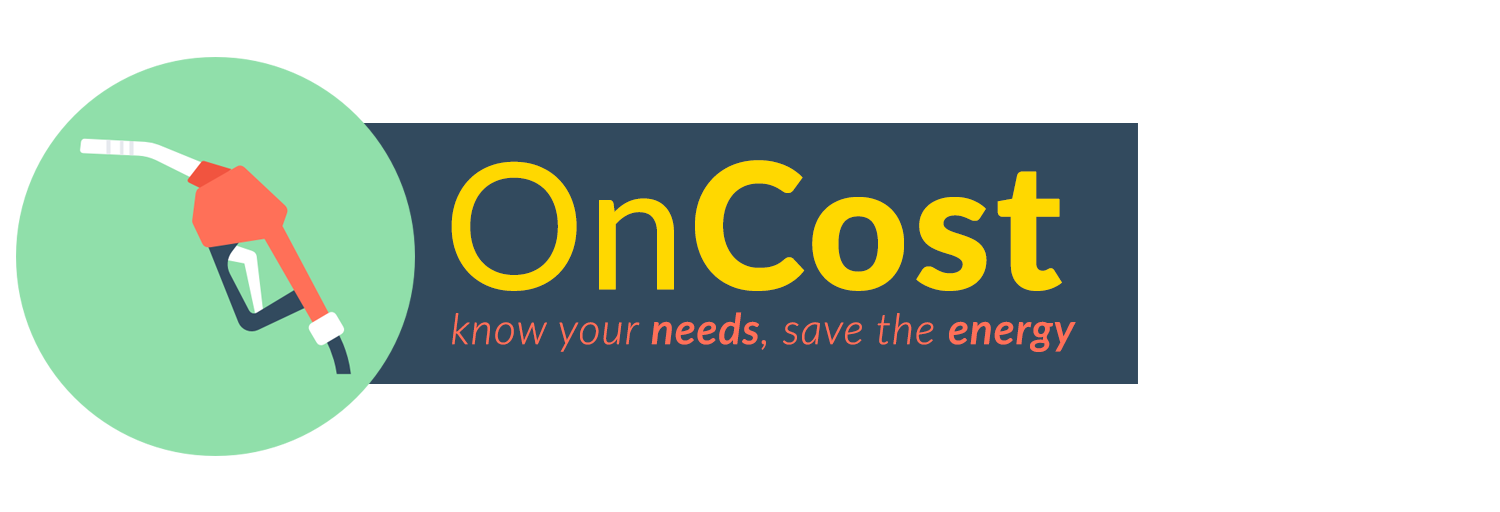
<style>
.page{position:relative;width:1500px;height:512px;background:#ffffff}
.page>*{position:absolute;margin:0}
.t1{font:174.7px "Lato-Heavy";color:#ffd800;font-weight:bold}
.t2{font:174.7px "Lato-Regular";color:#ffd800;font-weight:bold}
.t3{font:42.6px "Lato-LightItalic";color:#ff7058;font-weight:bold}
.t4{font:42.6px "Lato-SemiboldItalic";color:#ff7058;font-weight:bold}
</style>
<div class="page">
<p class="t1" style="left:451px;top:160px;width:611px;height:131px"><span class="t2">On</span>Cost</p>
<p class="t3" style="left:452px;top:312px;width:624px;height:40px">know your <span class="t4">needs</span>, save the <span class="t4">energy</span></p>
</div>
